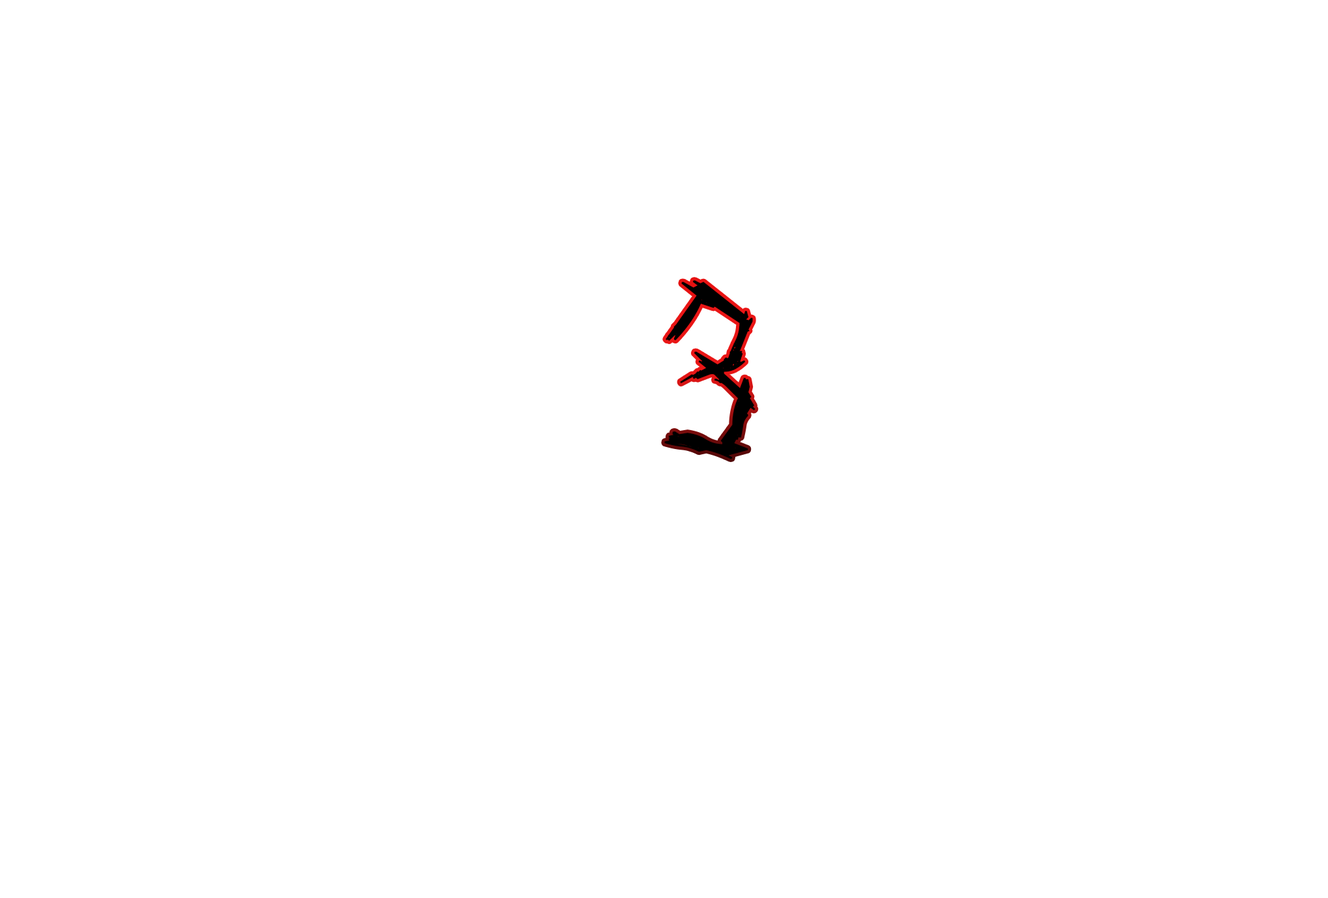
<style>
.page{position:relative;width:1328px;height:898px;background:#ffffff}
.page>*{position:absolute;margin:0}
.t1{font:199.3px "onryou";color:#000000;font-weight:bold}
</style>
<div class="page">
<p class="t1" style="left:664px;top:280px;width:92px;height:179px">3</p>
</div>
